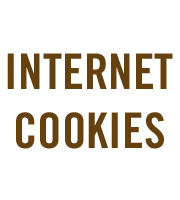
<style>
.page{position:relative;width:180px;height:200px;background:#ffffff}
.page>*{position:absolute;margin:0}
.t1{font:49.1px "TradeGothicLT-BoldCondTwenty";color:#664110;text-transform:uppercase}
</style>
<div class="page">
<p class="t1" style="left:7px;top:53px;width:166px;height:96px;text-align:center">Internet<br>Cookies</p>
</div>
